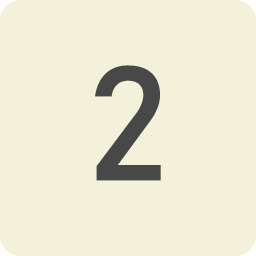
<style>
.page{position:relative;width:256px;height:256px;background:#f4f1da}
.page>*{position:absolute;margin:0}
.t1{font:160px "Bahnschrift";color:#484848}
</style>
<div class="page">
<p class="t1" style="left:95px;top:65px;width:66px;height:116px">2</p>
</div>
